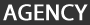
<style>
.page{position:relative;width:90px;height:25px;background:#333333}
.page>*{position:absolute;margin:0}
.t1{font:23px "MyriadPro-Regular";color:#ffffff;font-weight:bold}
</style>
<div class="page">
<p class="t1" style="left:3px;top:4px;width:85px;height:17px">AGENCY</p>
</div>
